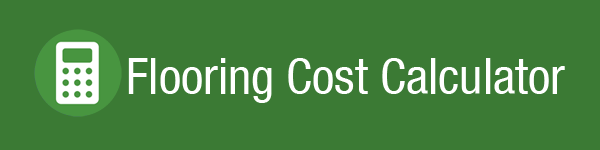
<style>
.page{position:relative;width:600px;height:150px;background:#3b7a34}
.page>*{position:absolute;margin:0}
.t1{font:50px "HelveticaNeueLTCom-Cn";color:#ffffff}
</style>
<div class="page">
<p class="t1" style="left:128px;top:58px;width:437px;height:45px">Flooring Cost Calculator</p>
</div>
